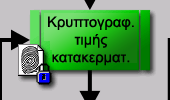
<style>
.page{position:relative;width:170px;height:100px;background:#c6c3c6}
.page>*{position:absolute;margin:0}
.t1{font:14.7px "ArialMT";color:#000000}
</style>
<div class="page">
<p class="t1" style="left:48px;top:16px;width:86px;height:50px;text-align:center">Κρυπτογραφ.<br>τιμής<br>κατακερματ.</p>
</div>
